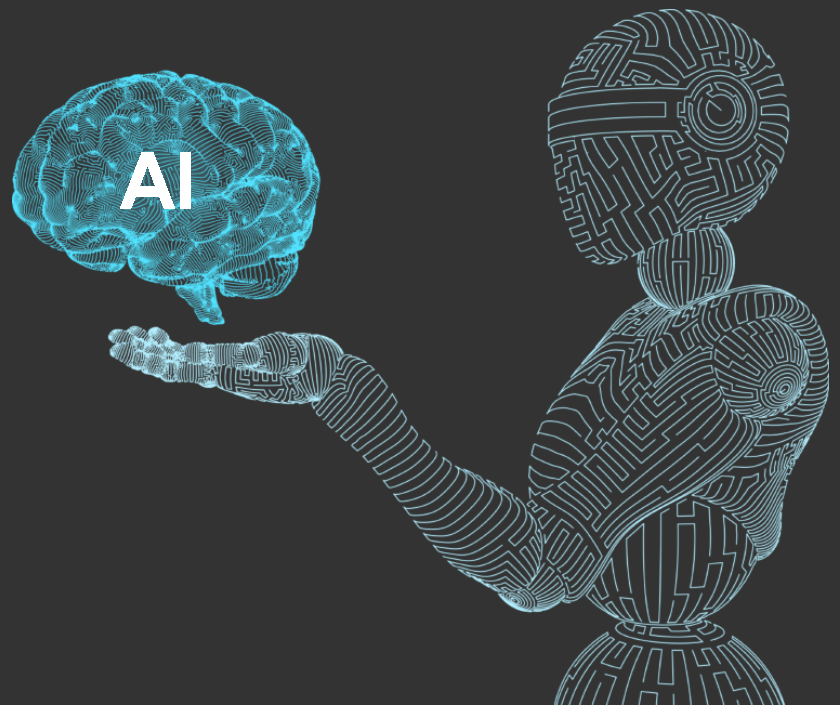
<style>
.page{position:relative;width:840px;height:705px;background:#333333}
.page>*{position:absolute;margin:0}
.t1{font:80.2px "CenturyGothic-Bold";letter-spacing:0.025em;color:#ffffff}
</style>
<div class="page">
<p class="t1" style="left:120px;top:152px;width:71px;height:57px">AI</p>
</div>
